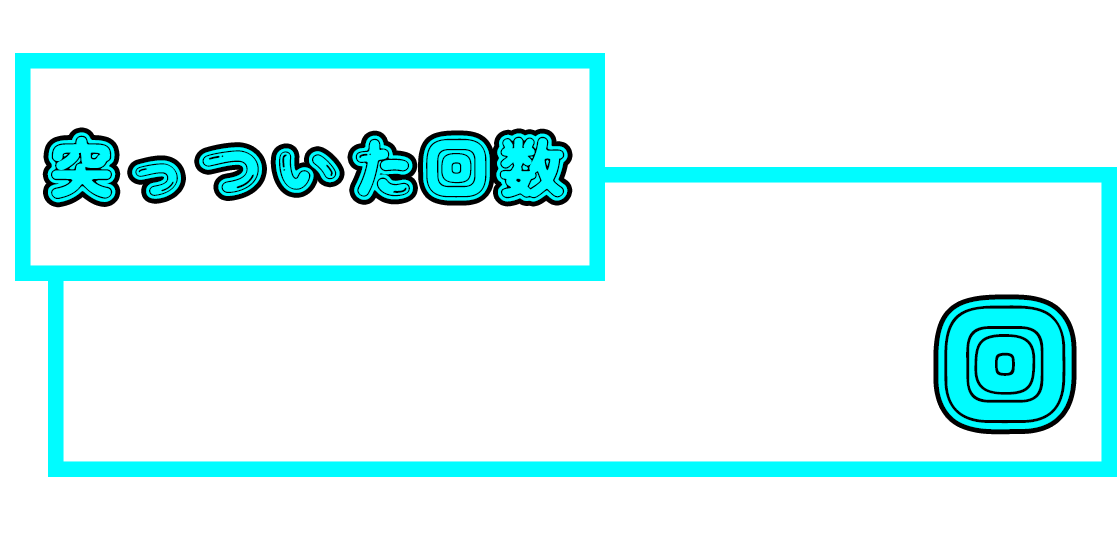
<style>
.page{position:relative;width:1120px;height:560px;background:#ffffff}
.page>*{position:absolute;margin:0}
.t1{font:75px "DokiDokiFantasia";color:#00fcff}
.t2{font:150px "DokiDokiFantasia";color:#00fcff}
</style>
<div class="page">
<p class="t1" style="left:47px;top:132px;width:521px;height:71px">突っついた回数</p>
<p class="t2" style="left:938px;top:299px;width:134px;height:131px">回</p>
</div>
